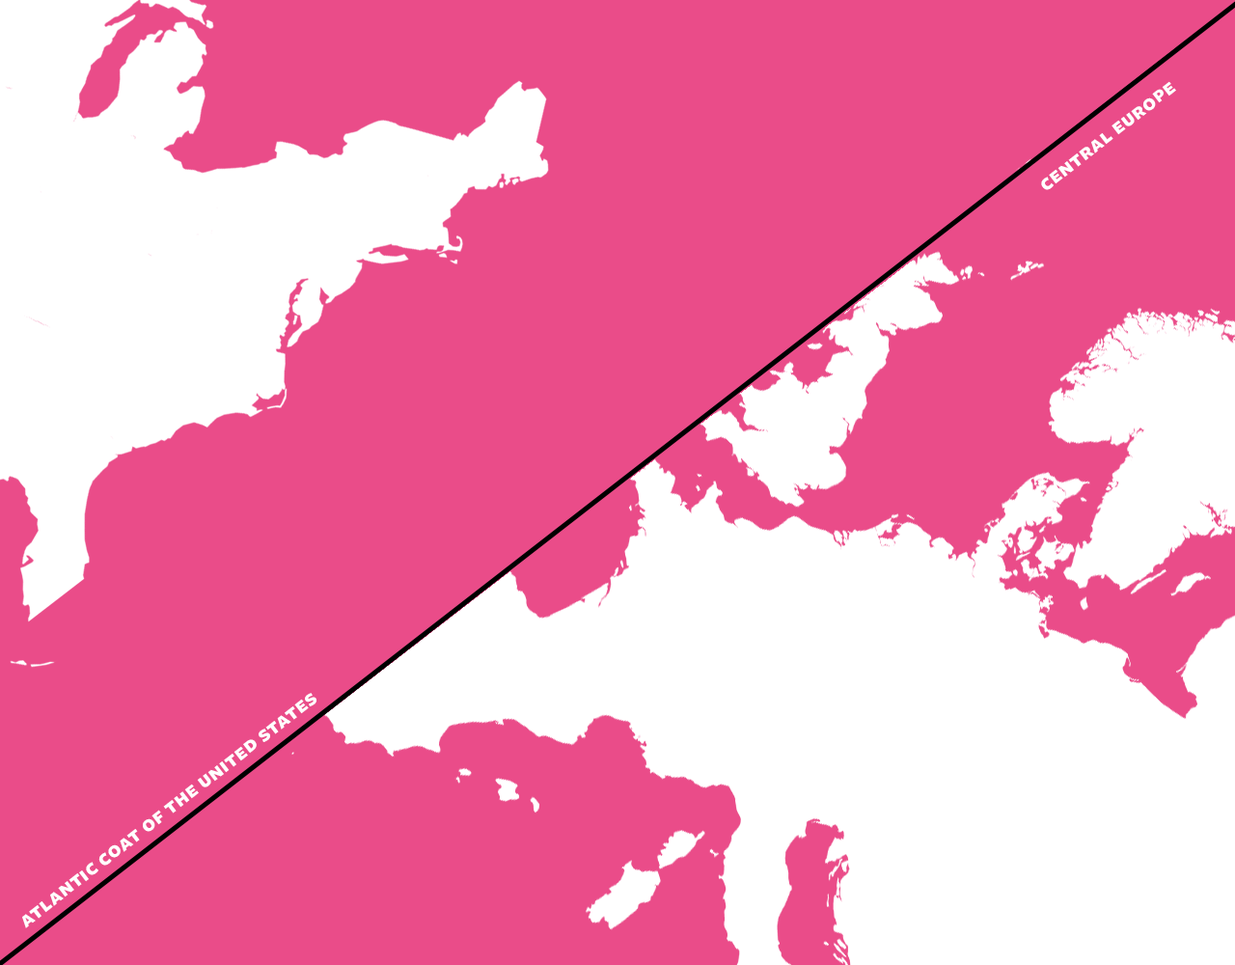
<style>
.page{position:relative;width:1235px;height:965px;background:#ea4c89}
.page>*{position:absolute;margin:0}
.t1{font:22.9px "FreightSans-BoldSC";letter-spacing:0.02em;color:#ffffff}
</style>
<div class="page">
<p class="t1" style="left:1041px;top:81px;width:136px;height:109px;rotate:-38deg">central europe</p>
<p class="t1" style="left:22px;top:693px;width:295px;height:236px;rotate:-38deg">atlantic coat of the united states</p>
</div>
